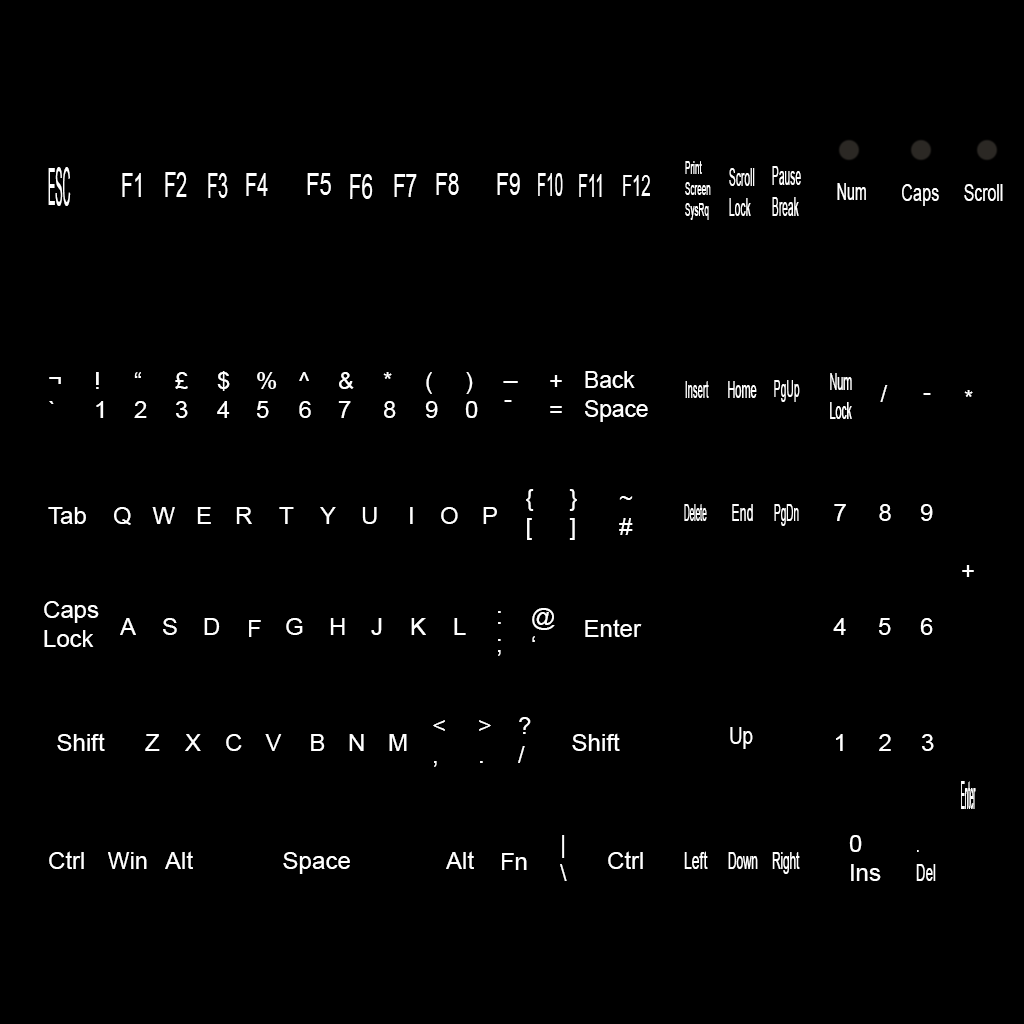
<style>
.page{position:relative;width:1024px;height:1024px;background:#000000}
.page>*{position:absolute;margin:0}
.t1{font:17.7px "ArialMT";color:#ffffff;scale:0.46 1}
.t2{font:52.4px "ArialMT";color:#ffffff;scale:0.21 1}
.t3{font:33.4px "ArialMT";color:#ffffff;scale:0.6 1}
.t4{font:34.3px "ArialMT";color:#ffffff;scale:0.57 1}
.t5{font:35.1px "ArialMT";color:#ffffff;scale:0.51 1}
.t6{font:31.9px "ArialMT";color:#ffffff;scale:0.63 1}
.t7{font:30.2px "ArialMT";color:#ffffff;scale:0.74 1}
.t8{font:33.5px "ArialMT";color:#ffffff;scale:0.62 1}
.t9{font:31.8px "ArialMT";color:#ffffff;scale:0.65 1}
.t10{font:31.2px "ArialMT";color:#ffffff;scale:0.67 1}
.t11{font:30px "ArialMT";color:#ffffff;scale:0.71 1}
.t12{font:32px "ArialMT";color:#ffffff;scale:0.47 1}
.t13{font:31.8px "ArialMT";color:#ffffff;scale:0.5 1}
.t14{font:25.3px "ArialMT";color:#ffffff;scale:0.41 1}
.t15{font:26.4px "ArialMT";color:#ffffff;scale:0.39 1}
.t16{font:29.4px "ArialMT";color:#ffffff;scale:0.56 1}
.t17{font:24px "ArialMT";color:#ffffff;scale:0.59 1}
.t18{font:24px "ArialMT";color:#ffffff;scale:0.68 1}
.t19{font:24px "ArialMT";color:#ffffff;scale:0.66 1}
.t20{font:24px "ArialMT";color:#ffffff}
.t21{font:24px "ArialMT";color:#ffffff;scale:0.95 1}
.t22{font:24px "ArialMT";color:#ffffff;scale:0.44 1}
.t23{font:24px "ArialMT";color:#ffffff;scale:0.39 1}
.t24{font:24px "ArialMT";color:#ffffff;scale:0.45 1}
.t25{font:24px "ArialMT";color:#ffffff;scale:0.43 1}
.t26{font:24px "ArialMT";color:#ffffff;scale:0.32 1}
.t27{font:24px "ArialMT";color:#ffffff;scale:0.52 1}
.t28{font:24px "ArialMT";color:#ffffff;scale:0.42 1}
.t29{font:24px "ArialMT";color:#ffffff;scale:0.79 1}
.t30{font:39.4px "ArialMT";color:#ffffff;scale:0.16 1}
.t31{font:24px "ArialMT";color:#ffffff;scale:0.97 1}
.t32{font:24px "ArialMT";color:#ffffff;scale:0.58 1}
.t33{font:24px "ArialMT";color:#ffffff;scale:0.49 1}
.t34{font:24px "ArialMT";color:#ffffff;scale:0.48 1}
.t35{font:24px "ArialMT";color:#ffffff;scale:0.56 1}
</style>
<div class="page">
<p class="t1" style="left:685px;top:161px;width:26px;height:59px">Print<br>Screen<br>SysRq</p>
<p class="t2" style="left:48px;top:167px;width:23px;height:39px">ESC</p>
<p class="t3" style="left:122px;top:173px;width:19px;height:24px">F1</p>
<p class="t4" style="left:165px;top:172px;width:22px;height:25px">F2</p>
<p class="t5" style="left:208px;top:173px;width:20px;height:25px">F3</p>
<p class="t6" style="left:246px;top:173px;width:22px;height:23px">F4</p>
<p class="t7" style="left:307px;top:173px;width:24px;height:22px">F5</p>
<p class="t8" style="left:350px;top:174px;width:23px;height:25px">F6</p>
<p class="t9" style="left:394px;top:174px;width:23px;height:23px">F7</p>
<p class="t10" style="left:436px;top:173px;width:23px;height:22px">F8</p>
<p class="t11" style="left:497px;top:173px;width:23px;height:22px">F9</p>
<p class="t12" style="left:538px;top:173px;width:25px;height:23px">F10</p>
<p class="t13" style="left:579px;top:174px;width:23px;height:23px">F11</p>
<p class="t14" style="left:729px;top:168px;width:26px;height:48px">Scroll<br>Lock</p>
<p class="t15" style="left:772px;top:166px;width:29px;height:50px">Pause<br>Break</p>
<p class="t16" style="left:623px;top:175px;width:27px;height:21px">F12</p>
<p class="t17" style="left:837px;top:183px;width:29px;height:17px">Num</p>
<p class="t18" style="left:902px;top:184px;width:37px;height:22px">Caps</p>
<p class="t19" style="left:964px;top:184px;width:39px;height:17px">Scroll</p>
<p class="t20" style="left:49px;top:377px;width:12px;height:27px">¬<br>`</p>
<p class="t20" style="left:96px;top:372px;width:8px;height:46px">!<br>1</p>
<p class="t20" style="left:134px;top:372px;width:13px;height:46px">“<br>2</p>
<p class="t20" style="left:175px;top:372px;width:13px;height:46px">£<br>3</p>
<p class="t20" style="left:217px;top:371px;width:13px;height:47px">$<br>4</p>
<p class="t20" style="left:257px;top:372px;width:20px;height:46px">%<br>5</p>
<p class="t20" style="left:299px;top:372px;width:12px;height:46px">^<br>6</p>
<p class="t20" style="left:338px;top:372px;width:16px;height:46px">&amp;<br>7</p>
<p class="t20" style="left:383px;top:372px;width:13px;height:46px">*<br>8</p>
<p class="t20" style="left:425px;top:372px;width:13px;height:46px">(<br>9</p>
<p class="t20" style="left:465px;top:372px;width:13px;height:46px">)<br>0</p>
<p class="t20" style="left:550px;top:375px;width:12px;height:38px">+<br>=</p>
<p class="t21" style="left:585px;top:371px;width:63px;height:51px">Back<br>Space</p>
<p class="t22" style="left:830px;top:373px;width:22px;height:46px">Num<br>Lock</p>
<p class="t20" style="left:503px;top:381px;width:15px;height:21px">_<br>-</p>
<p class="t23" style="left:685px;top:381px;width:24px;height:17px">Insert</p>
<p class="t24" style="left:728px;top:381px;width:29px;height:17px">Home</p>
<p class="t25" style="left:774px;top:380px;width:26px;height:22px">PgUp</p>
<p class="t20" style="left:880px;top:385px;width:8px;height:17px">/</p>
<p class="t20" style="left:964px;top:390px;width:9px;height:7px">*</p>
<p class="t20" style="left:923px;top:393px;width:8px;height:2px">-</p>
<p class="t20" style="left:526px;top:489px;width:8px;height:51px">{<br>[</p>
<p class="t20" style="left:569px;top:489px;width:8px;height:51px">}<br>]</p>
<p class="t20" style="left:619px;top:496px;width:14px;height:39px">~<br>#</p>
<p class="t20" style="left:48px;top:507px;width:38px;height:17px">Tab</p>
<p class="t20" style="left:114px;top:507px;width:17px;height:18px">Q</p>
<p class="t20" style="left:152px;top:507px;width:23px;height:17px">W</p>
<p class="t20" style="left:197px;top:507px;width:14px;height:17px">E</p>
<p class="t20" style="left:236px;top:507px;width:16px;height:17px">R</p>
<p class="t20" style="left:279px;top:507px;width:15px;height:17px">T</p>
<p class="t20" style="left:320px;top:507px;width:16px;height:17px">Y</p>
<p class="t20" style="left:362px;top:507px;width:15px;height:17px">U</p>
<p class="t20" style="left:410px;top:507px;width:3px;height:17px">I</p>
<p class="t20" style="left:441px;top:507px;width:17px;height:17px">O</p>
<p class="t20" style="left:483px;top:507px;width:14px;height:17px">P</p>
<p class="t26" style="left:684px;top:504px;width:23px;height:17px">Delete</p>
<p class="t27" style="left:732px;top:504px;width:21px;height:17px">End</p>
<p class="t28" style="left:774px;top:504px;width:25px;height:22px">PgDn</p>
<p class="t20" style="left:834px;top:504px;width:12px;height:17px">7</p>
<p class="t20" style="left:879px;top:504px;width:12px;height:17px">8</p>
<p class="t20" style="left:920px;top:504px;width:13px;height:17px">9</p>
<p class="t20" style="left:962px;top:565px;width:12px;height:12px">+</p>
<p class="t20" style="left:44px;top:601px;width:55px;height:46px">Caps<br>Lock</p>
<p class="t20" style="left:498px;top:611px;width:3px;height:45px">:<br>;</p>
<p class="t20" style="left:532px;top:608px;width:23px;height:34px">@<br>‘</p>
<p class="t20" style="left:120px;top:618px;width:16px;height:17px">A</p>
<p class="t20" style="left:163px;top:618px;width:14px;height:17px">S</p>
<p class="t20" style="left:204px;top:618px;width:16px;height:17px">D</p>
<p class="t20" style="left:249px;top:620px;width:12px;height:17px">F</p>
<p class="t20" style="left:286px;top:618px;width:17px;height:17px">G</p>
<p class="t20" style="left:330px;top:618px;width:15px;height:17px">H</p>
<p class="t20" style="left:371px;top:618px;width:11px;height:17px">J</p>
<p class="t20" style="left:411px;top:618px;width:15px;height:17px">K</p>
<p class="t20" style="left:454px;top:618px;width:12px;height:17px">L</p>
<p class="t20" style="left:585px;top:619px;width:57px;height:18px">Enter</p>
<p class="t20" style="left:833px;top:618px;width:13px;height:17px">4</p>
<p class="t20" style="left:879px;top:618px;width:12px;height:17px">5</p>
<p class="t20" style="left:920px;top:618px;width:13px;height:17px">6</p>
<p class="t20" style="left:433px;top:720px;width:12px;height:47px">&lt;<br>,</p>
<p class="t20" style="left:479px;top:720px;width:12px;height:43px">&gt;<br>.</p>
<p class="t20" style="left:518px;top:717px;width:13px;height:46px">?<br>/</p>
<p class="t20" style="left:57px;top:733px;width:48px;height:18px">Shift</p>
<p class="t20" style="left:145px;top:734px;width:15px;height:17px">Z</p>
<p class="t20" style="left:185px;top:734px;width:16px;height:17px">X</p>
<p class="t20" style="left:226px;top:734px;width:16px;height:17px">C</p>
<p class="t20" style="left:265px;top:734px;width:17px;height:17px">V</p>
<p class="t20" style="left:311px;top:734px;width:14px;height:17px">B</p>
<p class="t20" style="left:349px;top:734px;width:15px;height:17px">N</p>
<p class="t20" style="left:389px;top:734px;width:18px;height:17px">M</p>
<p class="t20" style="left:572px;top:733px;width:48px;height:18px">Shift</p>
<p class="t29" style="left:730px;top:727px;width:23px;height:22px">Up</p>
<p class="t20" style="left:836px;top:734px;width:7px;height:17px">1</p>
<p class="t20" style="left:879px;top:734px;width:12px;height:17px">2</p>
<p class="t20" style="left:922px;top:734px;width:12px;height:17px">3</p>
<p class="t30" style="left:961px;top:781px;width:15px;height:28px">Enter</p>
<p class="t20" style="left:560px;top:835px;width:7px;height:46px">|<br>\</p>
<p class="t20" style="left:849px;top:835px;width:32px;height:46px">0<br>Ins</p>
<p class="t20" style="left:49px;top:851px;width:35px;height:18px">Ctrl</p>
<p class="t31" style="left:108px;top:852px;width:39px;height:17px">Win</p>
<p class="t20" style="left:165px;top:851px;width:28px;height:18px">Alt</p>
<p class="t20" style="left:283px;top:852px;width:67px;height:22px">Space</p>
<p class="t20" style="left:446px;top:851px;width:28px;height:18px">Alt</p>
<p class="t20" style="left:502px;top:853px;width:25px;height:17px">Fn</p>
<p class="t20" style="left:608px;top:851px;width:35px;height:18px">Ctrl</p>
<p class="t32" style="left:684px;top:851px;width:24px;height:18px">Left</p>
<p class="t33" style="left:728px;top:852px;width:30px;height:17px">Down</p>
<p class="t34" style="left:772px;top:852px;width:28px;height:22px">Right</p>
<p class="t35" style="left:916px;top:850px;width:20px;height:31px">.<br>Del</p>
</div>
